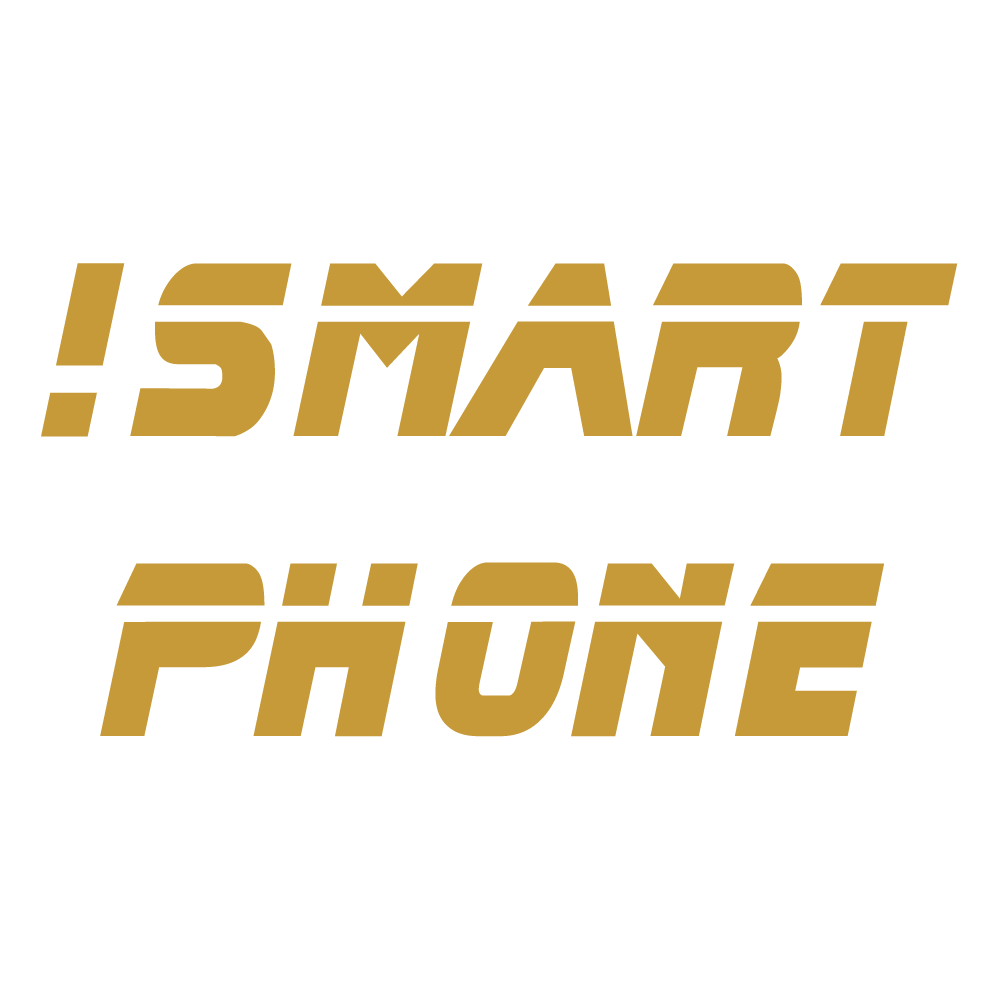
<style>
.page{position:relative;width:1000px;height:1000px;background:#ffffff}
.page>*{position:absolute;margin:0}
.t1{font:250px "SVN-BladeRunner";letter-spacing:0.05em;color:#c69a39;scale:0.77 1}
</style>
<div class="page">
<p class="t1" style="left:41px;top:263px;width:917px;height:474px;text-align:center">!smart<br>phone</p>
</div>
